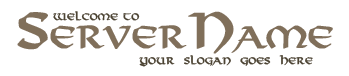
<style>
.page{position:relative;width:349px;height:76px;background:#ffffff}
.page>*{position:absolute;margin:0}
.t1{font:30px "Viking-Normal";color:#806f5a;font-weight:bold}
.t2{font:48px "Viking-Normal";color:#806f5a;font-weight:bold}
.t3{font:9px "Viking-Normal";color:#4b4333;font-weight:bold}
</style>
<div class="page">
<p class="t1" style="left:17px;top:11px;width:316px;height:43px"><span class="t2">S</span>erver<span class="t2">N</span>ame</p>
<p class="t3" style="left:53px;top:11px;width:87px;height:10px">Welcome to</p>
<p class="t3" style="left:139px;top:55px;width:174px;height:12px">Your  Slogan  Goes  Here</p>
</div>
